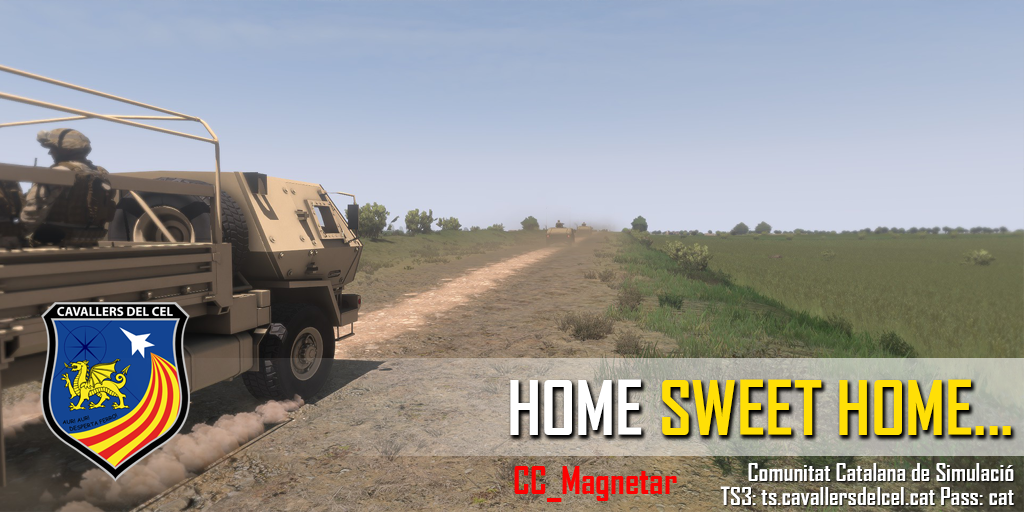
<style>
.page{position:relative;width:1024px;height:512px}
.page>*{position:absolute;margin:0}
.t1{font:72px "AgencyFB-Bold";color:#ffdf06}
.t2{font:72px "AgencyFB-Bold";color:#ffffff}
.t3{font:24px/24px "AgencyFB-Bold";color:#ffffff}
</style>
<div class="page">
<p class="t1" style="left:510px;top:379px;width:501px;height:56px"><span class="t2">HOME</span> SWEET HOME...</p>
<p class="t3" style="left:720px;top:463px;width:294px;height:42px;text-align:right">Comunitat Catalana de Simulació<br>TS3: ts.cavallersdelcel.cat Pass: cat</p>
</div>
